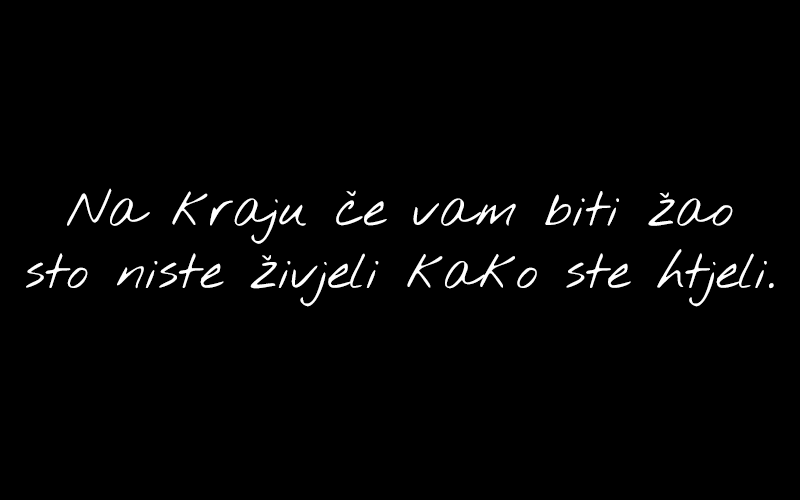
<style>
.page{position:relative;width:800px;height:500px;background:#000000}
.page>*{position:absolute;margin:0}
.t1{font:52px "NothingYouCouldDo";color:#ffffff}
</style>
<div class="page">
<p class="t1" style="left:26px;top:188px;width:748px;height:119px;text-align:center">Na kraju če vam biti žao<br>sto niste živjeli kako ste htjeli.</p>
</div>
